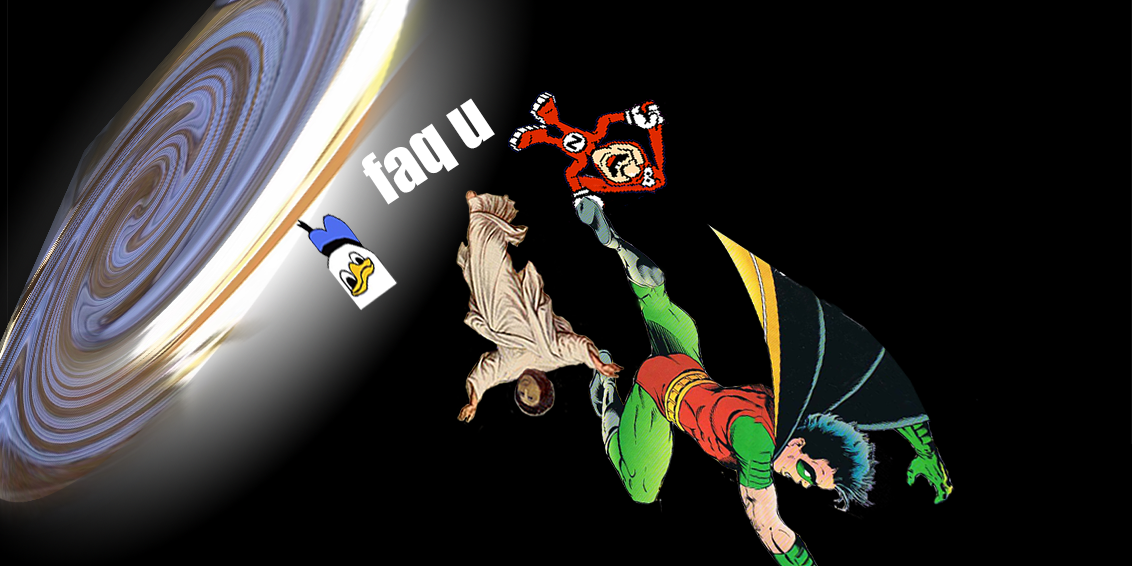
<style>
.page{position:relative;width:1132px;height:566px;background:#000000}
.page>*{position:absolute;margin:0}
.t1{font:66.1px "Impact";color:#ffffff}
</style>
<div class="page">
<p class="t1" style="left:362px;top:98px;width:133px;height:107px;rotate:-34deg">faq u</p>
</div>
